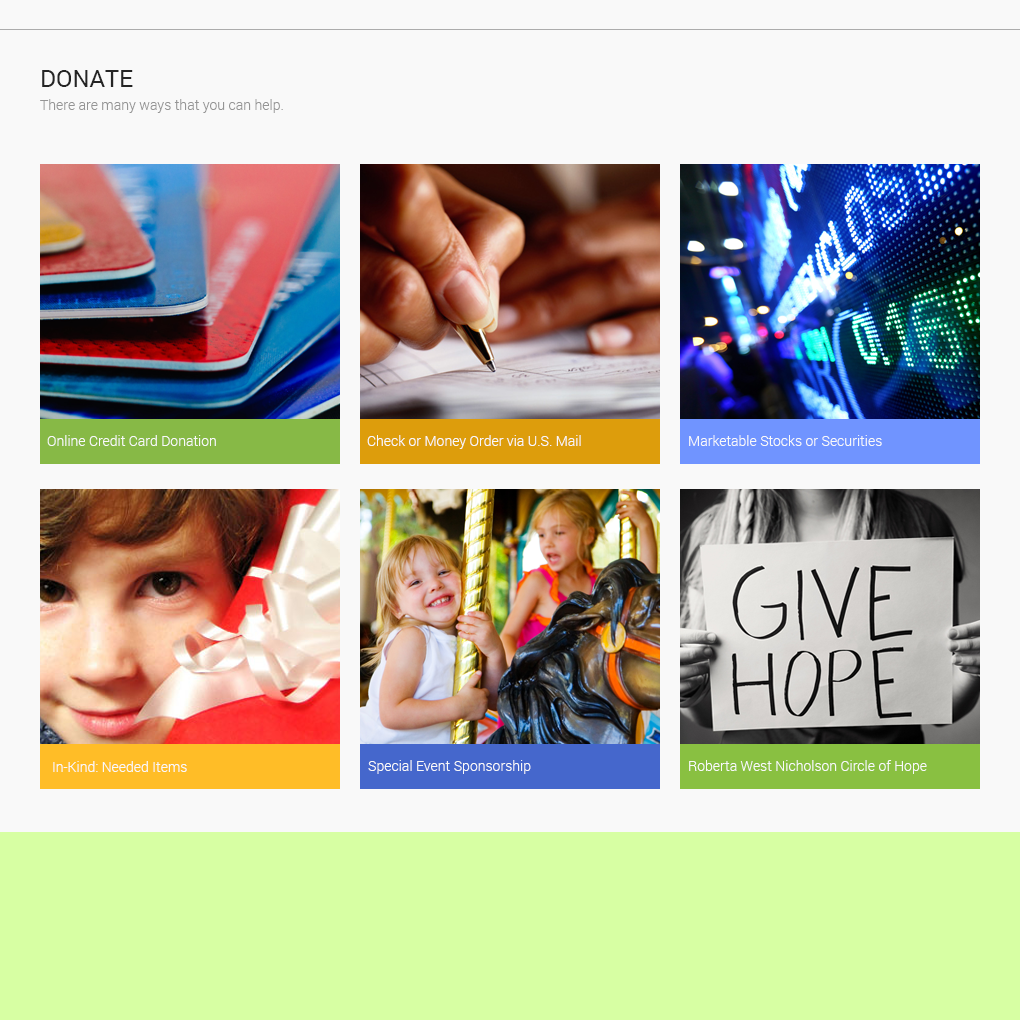
<style>
.page{position:relative;width:1020px;height:1020px;background:#f9f9f9}
.page>*{position:absolute;margin:0}
.t1{font:24px "Roboto-Regular";color:#252525}
.t2{font:14px "Roboto-Light";color:#959595}
.t3{font:14px "Roboto-Light";color:#f9f9f9}
</style>
<div class="page">
<p class="t1" style="left:42px;top:70px;width:91px;height:17px">DONATE</p>
<p class="t2" style="left:40px;top:99px;width:243px;height:14px">There are many ways that you can help.</p>
<p class="t3" style="left:47px;top:435px;width:169px;height:11px">Online Credit Card Donation</p>
<p class="t3" style="left:367px;top:435px;width:214px;height:14px">Check or Money Order via U.S. Mail</p>
<p class="t3" style="left:689px;top:435px;width:193px;height:11px">Marketable Stocks or Securities</p>
<p class="t3" style="left:53px;top:761px;width:134px;height:11px">In-Kind: Needed Items</p>
<p class="t3" style="left:368px;top:760px;width:163px;height:14px">Special Event Sponsorship</p>
<p class="t3" style="left:689px;top:760px;width:238px;height:14px">Roberta West Nicholson Circle of Hope</p>
</div>
